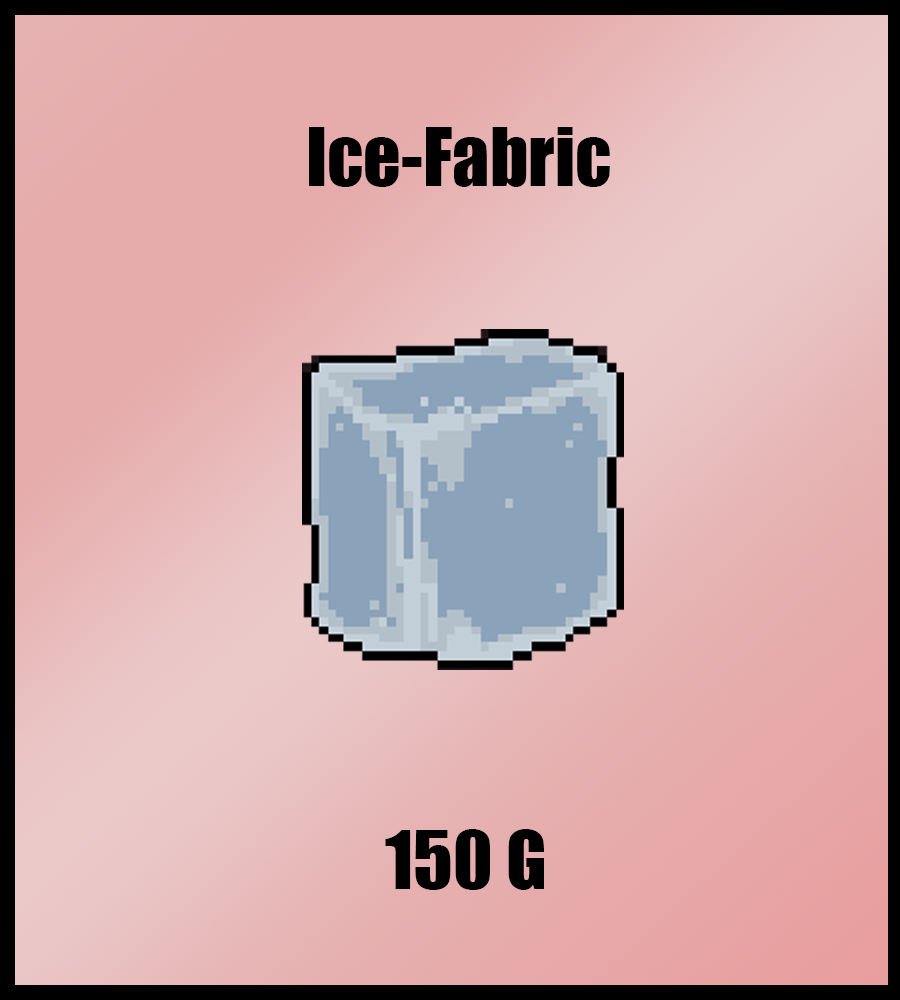
<style>
.page{position:relative;width:900px;height:1000px}
.page>*{position:absolute;margin:0}
.t1{font:74px "Impact";color:#000000}
</style>
<div class="page">
<p class="t1" style="left:309px;top:127px;width:301px;height:60px">Ice-Fabric</p>
<p class="t1" style="left:385px;top:829px;width:159px;height:61px">150 G</p>
</div>
